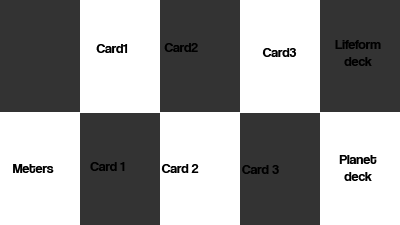
<style>
.page{position:relative;width:400px;height:225px;background:#333333}
.page>*{position:absolute;margin:0}
.t1{font:14px "CoolveticaRg-Regular";color:#000000}
</style>
<div class="page">
<p class="t1" style="left:335px;top:40px;width:46px;height:26px;text-align:center">Lifeform<br>deck</p>
<p class="t1" style="left:96px;top:44px;width:32px;height:9px">Card1</p>
<p class="t1" style="left:164px;top:43px;width:34px;height:9px">Card2</p>
<p class="t1" style="left:262px;top:48px;width:35px;height:9px">Card3</p>
<p class="t1" style="left:339px;top:155px;width:38px;height:26px;text-align:center">Planet<br>deck</p>
<p class="t1" style="left:13px;top:164px;width:41px;height:9px">Meters</p>
<p class="t1" style="left:90px;top:162px;width:35px;height:9px">Card 1</p>
<p class="t1" style="left:161px;top:164px;width:38px;height:9px">Card 2</p>
<p class="t1" style="left:242px;top:165px;width:37px;height:9px">Card 3</p>
</div>
